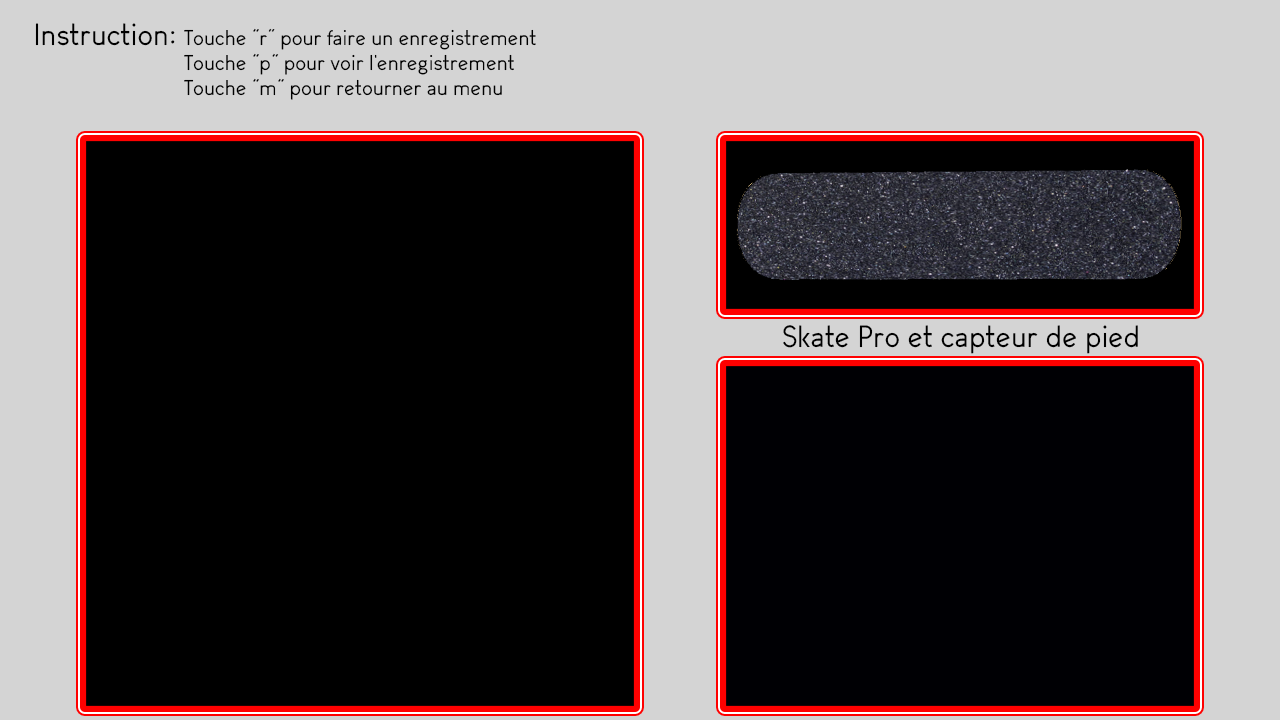
<style>
.page{position:relative;width:1280px;height:720px;background:#000000}
.page>*{position:absolute;margin:0}
.t1{font:30px "ArvinRegular-@";color:#000000}
.t2{font:21px "ArvinRegular-@";color:#000000}
</style>
<div class="page">
<p class="t1" style="left:35px;top:23px;width:140px;height:23px">Instruction:</p>
<p class="t2" style="left:184px;top:28px;width:352px;height:72px">Touche “r” pour faire un enregistrement<br>Touche “p” pour voir l’enregistrement<br>Touche “m” pour retourner au menu</p>
<p class="t1" style="left:783px;top:325px;width:355px;height:29px">Skate Pro et capteur de pied</p>
</div>
